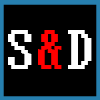
<style>
.page{position:relative;width:100px;height:100px;background:#000000}
.page>*{position:absolute;margin:0}
.t1{font:62.2px "PerfectDOSVGA437Win";color:#ffffff;scale:0.86 1}
.t2{font:62.2px "PerfectDOSVGA437Win";color:#ff0000;scale:0.86 1}
</style>
<div class="page">
<p class="t1" style="left:8px;top:30px;width:84px;height:39px">S<span class="t2">&amp;</span>D</p>
</div>
